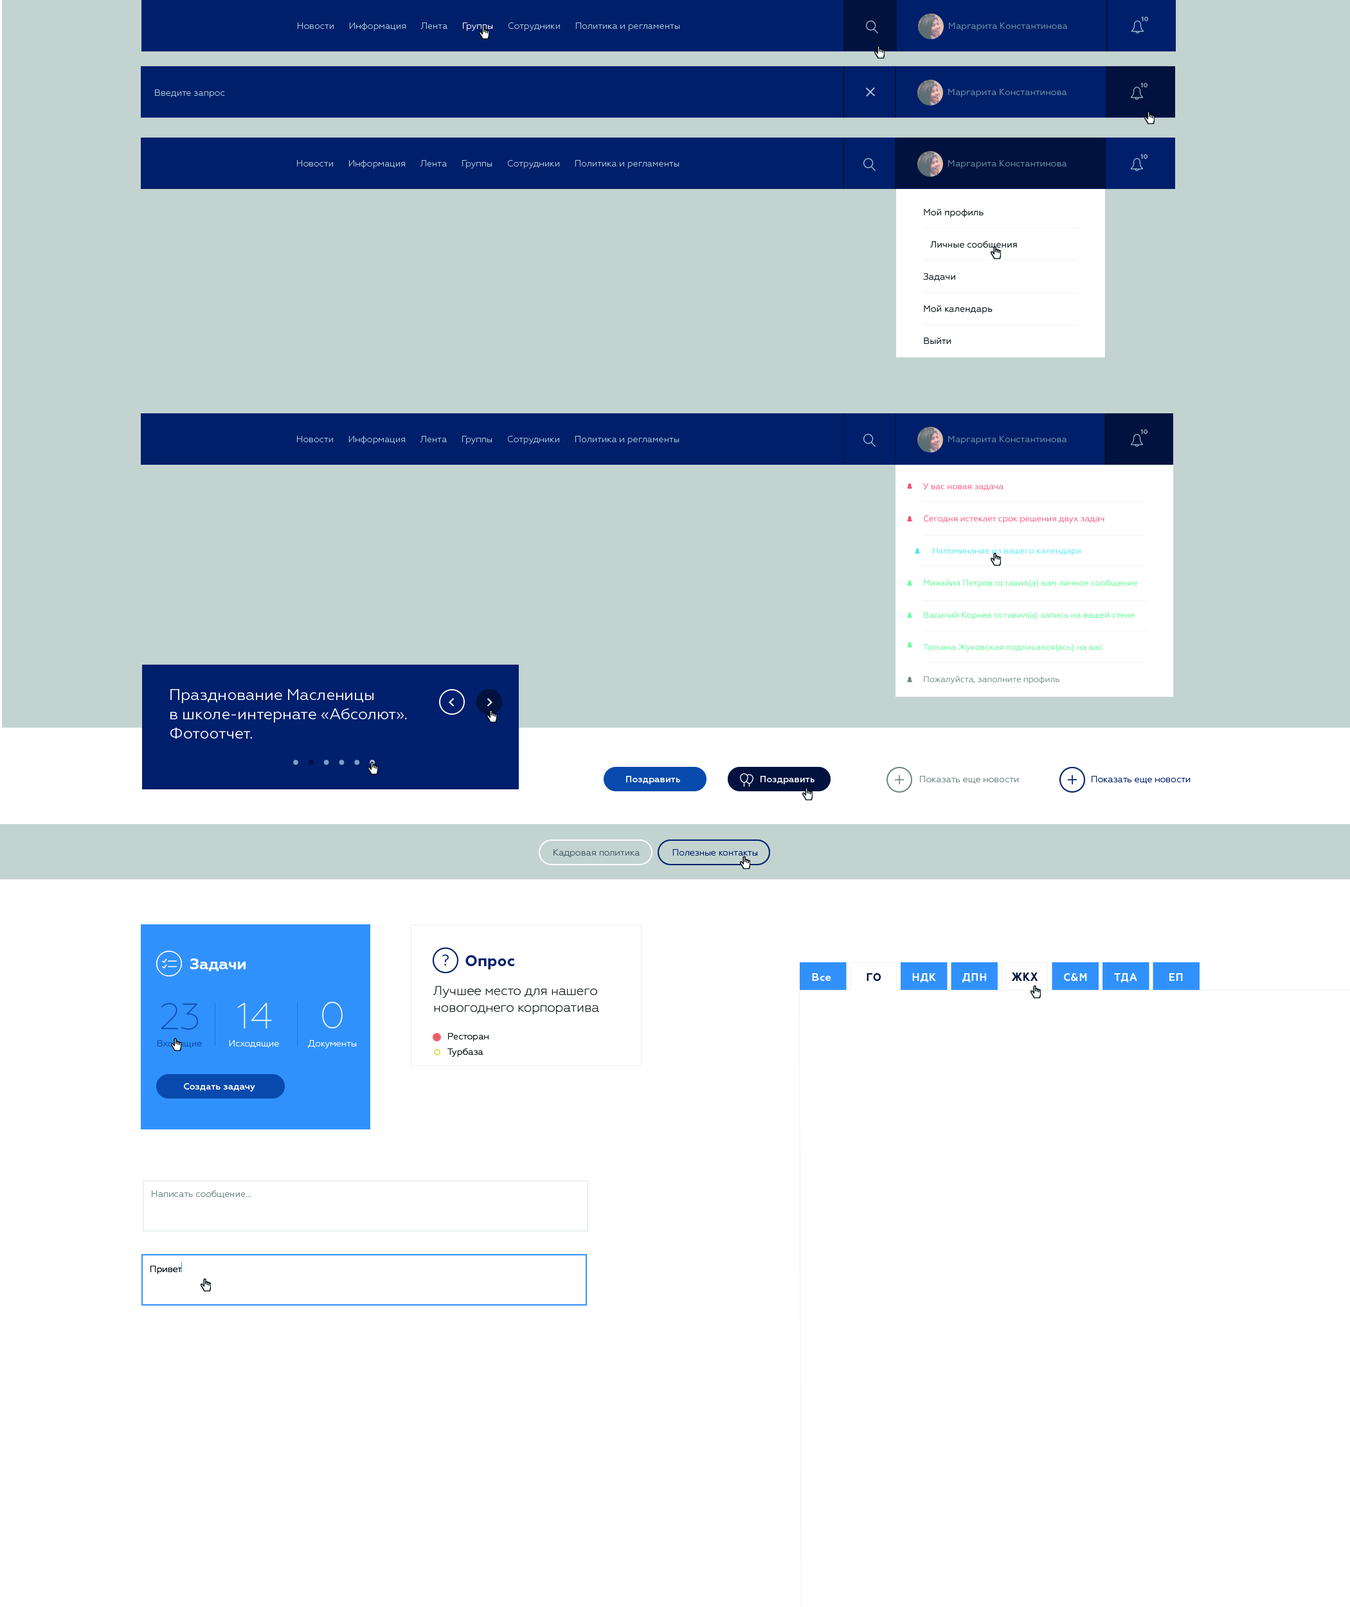
<style>
.page{position:relative;width:1350px;height:1607px;background:#ffffff}
.page>*{position:absolute;margin:0}
.t1{font:6.4px "Geometria-Medium";color:#aacad5}
.t2{font:9px "Geometria-Light";color:#aacbd5}
.t3{font:9px "Geometria-Light";color:#ffffff}
.t4{font:9px "Geometria";color:#618698}
.t5{font:9px/32.1px "Geometria";color:#0f1417}
.t6{font:8.4px/32.1px "Geometria";color:#50ff89}
.t7{font:8.4px/32.1px "Geometria";color:#f64c73}
.t8{font:8.4px/32.1px "Geometria";color:#4ae9ec}
.t9{font:8.4px/32.1px "Geometria";color:#6f8585}
.t10{font:15.4px/19.3px "Geometria";color:#ffffff}
.t11{font:9px "Geometria-Medium";letter-spacing:0.01em;color:#ffffff}
.t12{font:9px "Geometria-Light";color:#6f8585}
.t13{font:9px "Geometria-Light";color:#001f6c}
.t14{font:9px "Geometria-Light";color:#465d65}
.t15{font:15.4px "Geometria-Bold";color:#ffffff}
.t16{font:15.4px "Geometria";color:#001f6c}
.t17{font:12.9px/16.7px "Geometria-ExtraLight";color:#0f1417}
.t18{font:15.4px/25.7px "Geometria-Bold";color:#0f1417}
.t19{font:15.4px/25.7px "Geometria-Bold";color:#001f6c}
.t20{font:10.3px "Geometria-Bold";letter-spacing:0.05em;color:#ffffff}
.t21{font:10.3px "Geometria-Bold";letter-spacing:0.05em;color:#00113c}
.t22{font:11.9px "Geometria-Bold";letter-spacing:0.05em;color:#00113c;scale:0.86 1}
.t23{font:36.5px "Geometria-ExtraLight";color:#ffffff}
.t24{font:36.5px "Geometria-ExtraLight";color:#084aad}
.t25{font:9px/15.4px "Geometria-Light";color:#0f1417}
.t26{font:9px "Geometria-Light";color:#084aad}
.t27{font:9px "Geometria-Light";color:#010102}
</style>
<div class="page">
<p class="t1" style="left:1141px;top:17px;width:7px;height:4px">10</p>
<p class="t2" style="left:298px;top:22px;width:382px;height:9px">Новости      Информация      Лента      <span class="t3">Группы</span>      Сотрудники      Политика и регламенты</p>
<p class="t4" style="left:949px;top:22px;width:119px;height:9px">Маргарита Константинова</p>
<p class="t2" style="left:155px;top:89px;width:70px;height:9px">Введите запрос</p>
<p class="t4" style="left:948px;top:89px;width:119px;height:8px">Маргарита Константинова</p>
<p class="t1" style="left:1140px;top:83px;width:8px;height:4px">10</p>
<p class="t2" style="left:297px;top:160px;width:383px;height:8px">Новости      Информация      Лента      Группы      Сотрудники      Политика и регламенты</p>
<p class="t4" style="left:948px;top:160px;width:119px;height:8px">Маргарита Константинова</p>
<p class="t1" style="left:1140px;top:154px;width:8px;height:5px">10</p>
<p class="t5" style="left:923px;top:209px;width:94px;height:135px">Мой профиль<br>   Личные сообщения<br>Задачи<br>Мой календарь<br>Выйти</p>
<p class="t2" style="left:297px;top:436px;width:383px;height:8px">Новости      Информация      Лента      Группы      Сотрудники      Политика и регламенты</p>
<p class="t4" style="left:948px;top:436px;width:119px;height:8px">Маргарита Константинова</p>
<p class="t1" style="left:1140px;top:429px;width:8px;height:5px">10</p>
<p class="t6" style="left:923px;top:483px;width:215px;height:201px"><span class="t7">У вас новая задача<br>Сегодня истекает срок решения двух задач<br></span><span class="t8">    Напоминание из вашего календаря<br></span>Михайил Петров оставил(а) вам личное сообщение<br>Василий Корнев оставил(а) запись на вашей стене<br>Татьяна Жуковская подписался(ась) на вас<br><span class="t9">Пожалуйста, заполните профиль</span></p>
<p class="t10" style="left:170px;top:689px;width:237px;height:50px">Празднование Масленицы <br>в школе-интернате «Абсолют».<br>Фотоотчет.</p>
<p class="t11" style="left:626px;top:776px;width:54px;height:8px">Поздравить</p>
<p class="t11" style="left:760px;top:776px;width:55px;height:8px">Поздравить</p>
<p class="t12" style="left:920px;top:776px;width:99px;height:8px">Показать еще новости</p>
<p class="t13" style="left:1092px;top:776px;width:99px;height:8px">Показать еще новости</p>
<p class="t14" style="left:554px;top:849px;width:86px;height:9px">Кадровая политика</p>
<p class="t13" style="left:672px;top:849px;width:86px;height:7px">Полезные контакты</p>
<p class="t15" style="left:190px;top:959px;width:56px;height:12px">Задачи</p>
<p class="t16" style="left:442px;top:955px;width:7px;height:11px">?</p>
<p class="t17" style="left:465px;top:955px;width:49px;height:14px"><span class="t18">   </span><span class="t19">     Опрос<br></span>Лучшее место для нашего новогоднего корпоратива</p>
<p class="t20" style="left:812px;top:973px;width:19px;height:8px">Все</p>
<p class="t21" style="left:867px;top:973px;width:14px;height:8px">ГО</p>
<p class="t20" style="left:912px;top:973px;width:24px;height:10px">НДК</p>
<p class="t20" style="left:962px;top:973px;width:24px;height:10px">ДПН</p>
<p class="t22" style="left:1011px;top:973px;width:27px;height:8px">ЖКХ</p>
<p class="t20" style="left:1064px;top:973px;width:23px;height:8px">С&amp;М</p>
<p class="t20" style="left:1114px;top:973px;width:23px;height:10px">ТДА</p>
<p class="t20" style="left:1169px;top:973px;width:14px;height:8px">ЕП</p>
<p class="t17" style="left:433px;top:986px;width:166px;height:28px">Лучшее место для нашего новогоднего корпоратива</p>
<p class="t23" style="left:322px;top:1002px;width:21px;height:27px">0</p>
<p class="t24" style="left:161px;top:1003px;width:37px;height:27px">23</p>
<p class="t23" style="left:238px;top:1003px;width:34px;height:26px">14</p>
<p class="t25" style="left:447px;top:1033px;width:42px;height:24px">Ресторан<br>Турбаза</p>
<p class="t3" style="left:157px;top:1040px;width:200px;height:8px"><span class="t26">Входящие</span>           Исходящие            Документы</p>
<p class="t11" style="left:184px;top:1083px;width:71px;height:9px">Создать задачу</p>
<p class="t12" style="left:152px;top:1191px;width:99px;height:8px">Написать сообщение...</p>
<p class="t27" style="left:150px;top:1266px;width:32px;height:8px">Привет</p>
</div>
